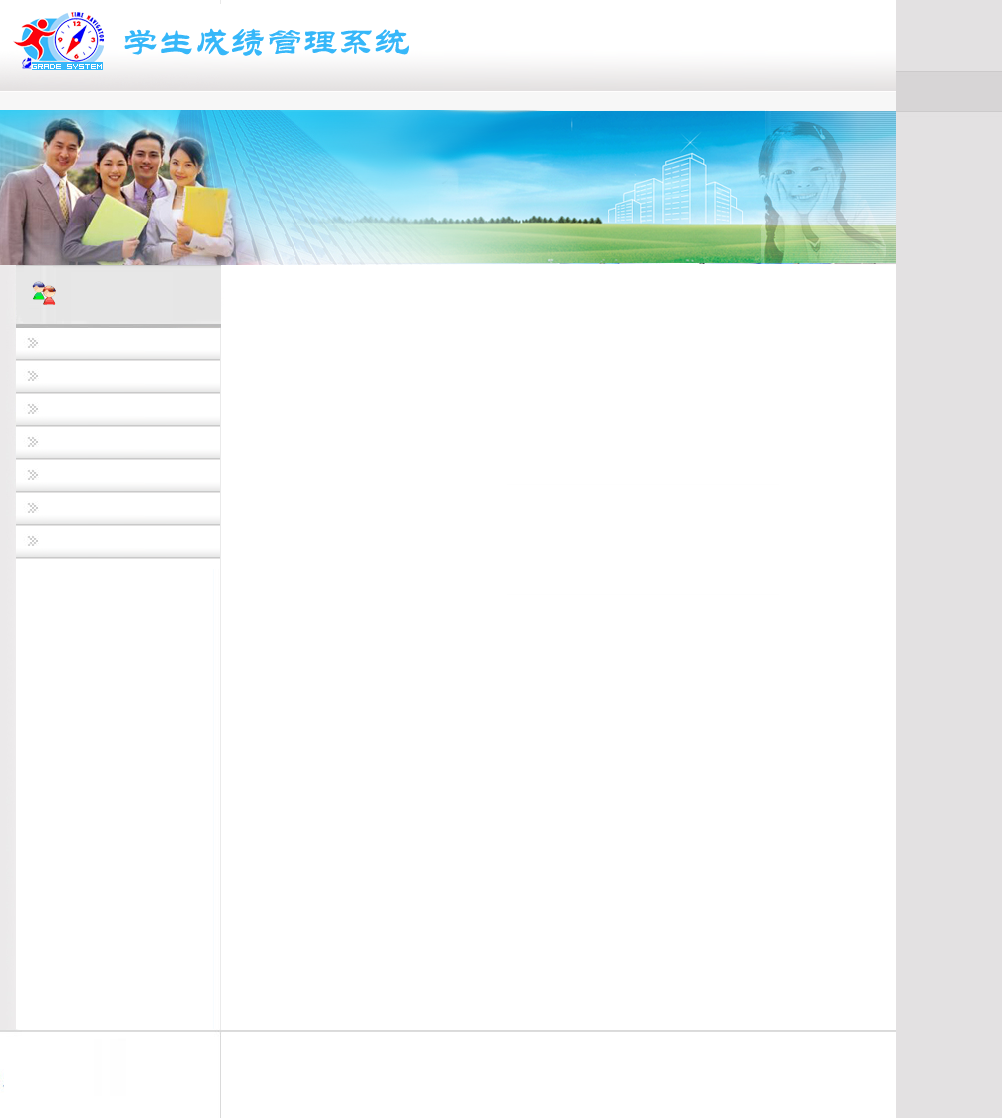
<style>
.page{position:relative;width:1002px;height:1118px;background:#ffffff}
.page>*{position:absolute;margin:0}
.t1{font:36px "STLiti";color:#36b7f9}
.t2{font:6px "04b08";color:#ffffff}
</style>
<div class="page">
<p class="t1" style="left:124px;top:28px;width:285px;height:28px">学生成绩管理系统</p>
<p class="t2" style="left:32px;top:64px;width:70px;height:5px">Grade System</p>
</div>
